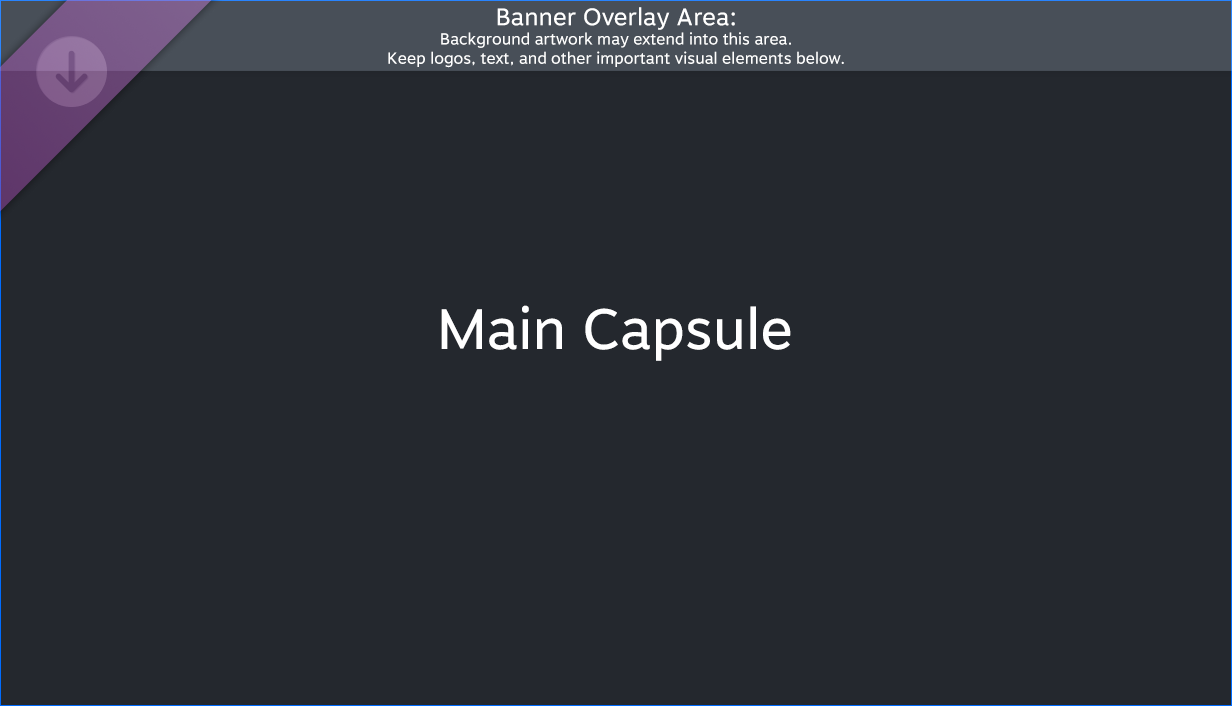
<style>
.page{position:relative;width:1232px;height:706px;background:#24282e}
.page>*{position:absolute;margin:0}
.t1{font:16px "MotivaSans-Regular";color:#ffffff}
.t2{font:24px "MotivaSans-Regular";color:#ffffff}
.t3{font:56.8px "MotivaSans-Regular";color:#ffffff}
</style>
<div class="page">
<p class="t1" style="left:388px;top:7px;width:456px;height:61px;text-align:center"><span class="t2">Banner Overlay Area:<br></span>Background artwork may extend into this area.<br>Keep logos, text, and other important visual elements below.</p>
<p class="t3" style="left:441px;top:305px;width:350px;height:56px">Main Capsule</p>
</div>
